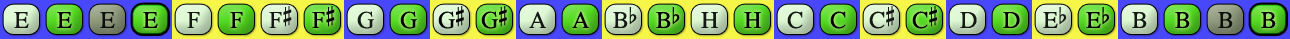
<style>
.page{position:relative;width:1290px;height:39px}
.page>*{position:absolute;margin:0}
.t1{font:24px "OpusChords";color:#000000}
.t2{font:24px "OpusChords";letter-spacing:-0.025em;color:#000000}
</style>
<div class="page">
<p class="t1" style="left:269px;top:6px;width:23px;height:22px;opacity:0.9">F#</p>
<p class="t1" style="left:312px;top:6px;width:23px;height:22px">F#</p>
<p class="t2" style="left:438px;top:6px;width:26px;height:23px">G#</p>
<p class="t2" style="left:481px;top:6px;width:26px;height:23px">G#</p>
<p class="t1" style="left:869px;top:6px;width:25px;height:23px;opacity:0.9">C#</p>
<p class="t1" style="left:912px;top:6px;width:25px;height:23px">C#</p>
<p class="t1" style="left:14px;top:12px;width:15px;height:16px;opacity:0.9">E</p>
<p class="t1" style="left:57px;top:12px;width:15px;height:16px">E</p>
<p class="t1" style="left:100px;top:12px;width:15px;height:16px;opacity:0.9">E</p>
<p class="t1" style="left:143px;top:12px;width:15px;height:16px">E</p>
<p class="t1" style="left:187px;top:12px;width:13px;height:16px;opacity:0.9">F</p>
<p class="t1" style="left:230px;top:12px;width:13px;height:16px">F</p>
<p class="t1" style="left:357px;top:11px;width:17px;height:18px;opacity:0.9">G</p>
<p class="t1" style="left:400px;top:11px;width:17px;height:18px">G</p>
<p class="t1" style="left:529px;top:11px;width:17px;height:17px;opacity:0.9">A</p>
<p class="t1" style="left:572px;top:11px;width:17px;height:17px">A</p>
<p class="t1" style="left:613px;top:7px;width:24px;height:21px;opacity:0.9">Bb</p>
<p class="t1" style="left:656px;top:7px;width:24px;height:21px">Bb</p>
<p class="t1" style="left:701px;top:12px;width:17px;height:16px;opacity:0.9">H</p>
<p class="t1" style="left:744px;top:12px;width:17px;height:16px">H</p>
<p class="t1" style="left:787px;top:11px;width:16px;height:18px;opacity:0.9">C</p>
<p class="t1" style="left:830px;top:11px;width:16px;height:18px">C</p>
<p class="t1" style="left:960px;top:12px;width:17px;height:16px;opacity:0.9">D</p>
<p class="t1" style="left:1003px;top:12px;width:17px;height:16px">D</p>
<p class="t1" style="left:1043px;top:7px;width:24px;height:21px;opacity:0.9">Eb</p>
<p class="t1" style="left:1086px;top:7px;width:24px;height:21px">Eb</p>
<p class="t1" style="left:1132px;top:12px;width:15px;height:16px;opacity:0.9">B</p>
<p class="t1" style="left:1175px;top:12px;width:15px;height:16px">B</p>
<p class="t1" style="left:1218px;top:12px;width:15px;height:16px;opacity:0.9">B</p>
<p class="t1" style="left:1261px;top:12px;width:15px;height:16px">B</p>
</div>
